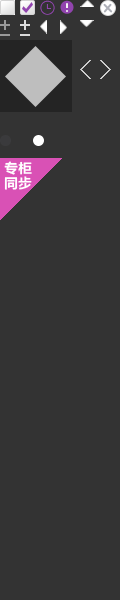
<style>
.page{position:relative;width:120px;height:600px;background:#333333}
.page>*{position:absolute;margin:0}
.t1{font:14px/15px "FZLTCHJW--GB1-0";color:#ffffff}
</style>
<div class="page">
<p class="t1" style="left:4px;top:161px;width:28px;height:29px">专柜<br>同步</p>
</div>
